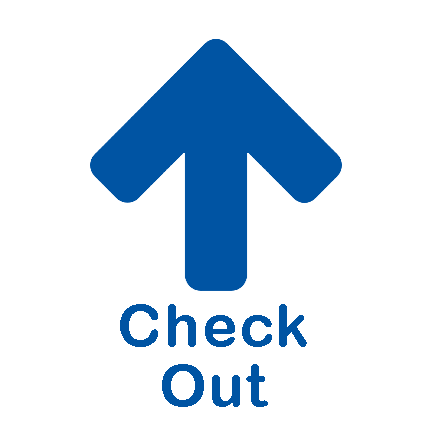
<style>
.page{position:relative;width:432px;height:432px;background:#ffffff}
.page>*{position:absolute;margin:0}
.t1{font:60px/60px "ArialRoundedMTBold";letter-spacing:0.03em;color:#0054a4}
</style>
<div class="page">
<p class="t1" style="left:120px;top:304px;width:187px;height:103px;text-align:center">Check<br>Out</p>
</div>
